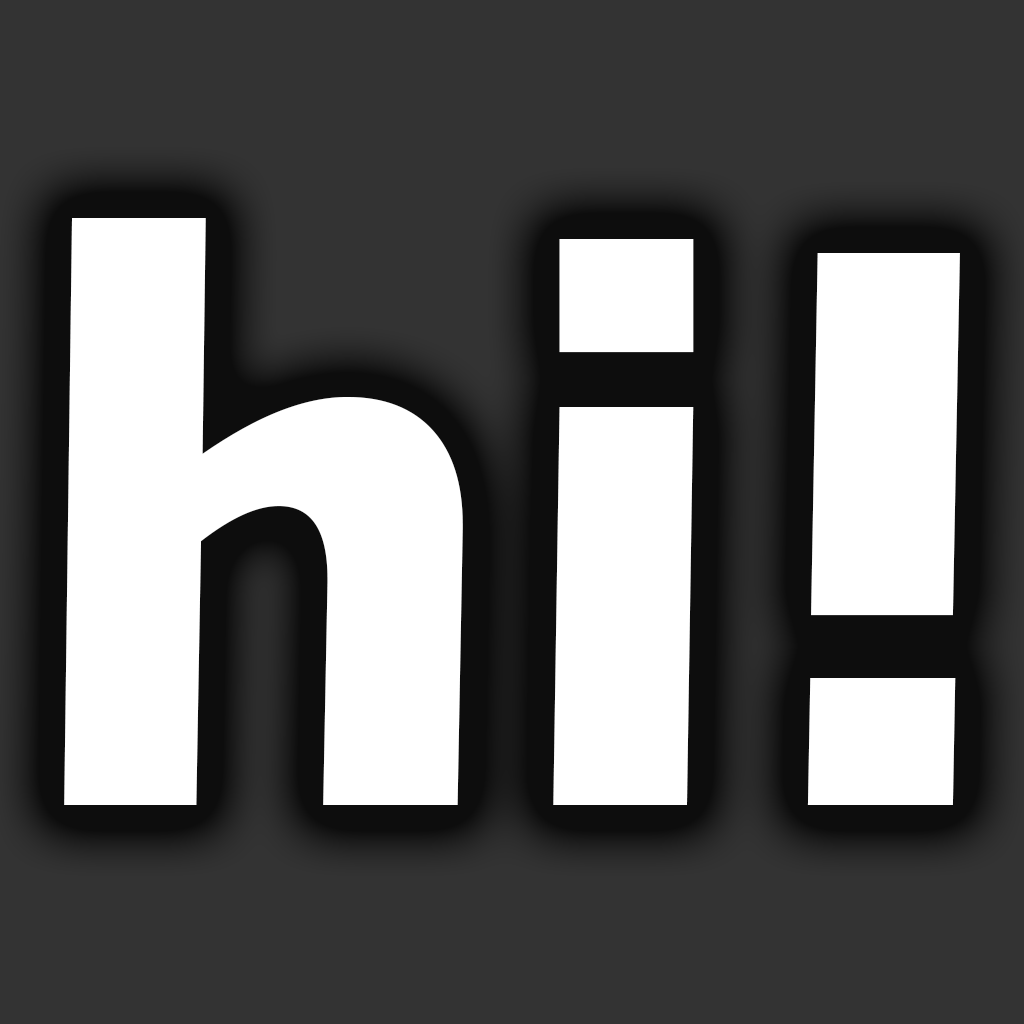
<style>
.page{position:relative;width:1024px;height:1024px;background:#333333}
.page>*{position:absolute;margin:0}
.t1{font:800px "Humanist531BT-BlackA";color:#ffffff}
</style>
<div class="page">
<p class="t1" style="left:64px;top:218px;width:896px;height:587px">hi!</p>
</div>
